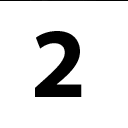
<style>
.page{position:relative;width:128px;height:128px;background:#ffffff}
.page>*{position:absolute;margin:0}
.t1{font:100px "MyriadHebrew-Bold";color:#000000}
</style>
<div class="page">
<p class="t1" style="left:35px;top:30px;width:47px;height:66px">2</p>
</div>
